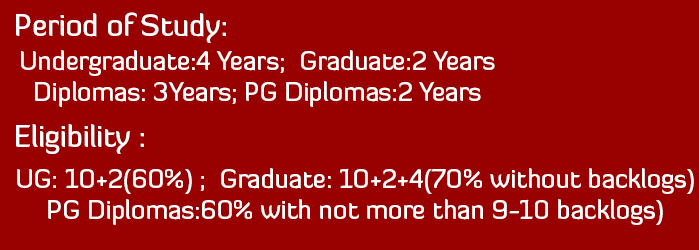
<style>
.page{position:relative;width:699px;height:250px;background:#990000}
.page>*{position:absolute;margin:0}
.t1{font:30px "DiavloMedium-Regular";letter-spacing:-0.01em;color:#ffffff}
.t2{font:26px "DiavloMedium-Regular";letter-spacing:-0.01em;color:#ffffff}
</style>
<div class="page">
<p class="t1" style="left:16px;top:12px;width:210px;height:31px">Period of Study:</p>
<p class="t2" style="left:21px;top:50px;width:474px;height:57px;text-align:center">Undergraduate:4 Years;  Graduate:2 Years<br>Diplomas: 3Years; PG Diplomas:2 Years</p>
<p class="t1" style="left:16px;top:124px;width:128px;height:30px">Eligibility :</p>
<p class="t2" style="left:17px;top:168px;width:677px;height:57px;text-align:center">UG: 10+2(60%) ;  Graduate: 10+2+4(70% without backlogs)<br>PG Diplomas:60% with not more than 9-10 backlogs)</p>
</div>
